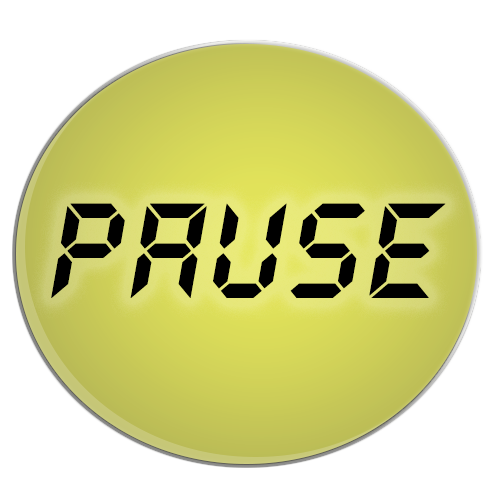
<style>
.page{position:relative;width:500px;height:500px;background:#ffffff}
.page>*{position:absolute;margin:0}
.t1{font:147.6px "DS-Digital-Bold";color:#000000;font-variant:small-caps;font-weight:bold;font-style:italic}
</style>
<div class="page">
<p class="t1" style="left:51px;top:203px;width:395px;height:95px">PAUSE</p>
</div>
